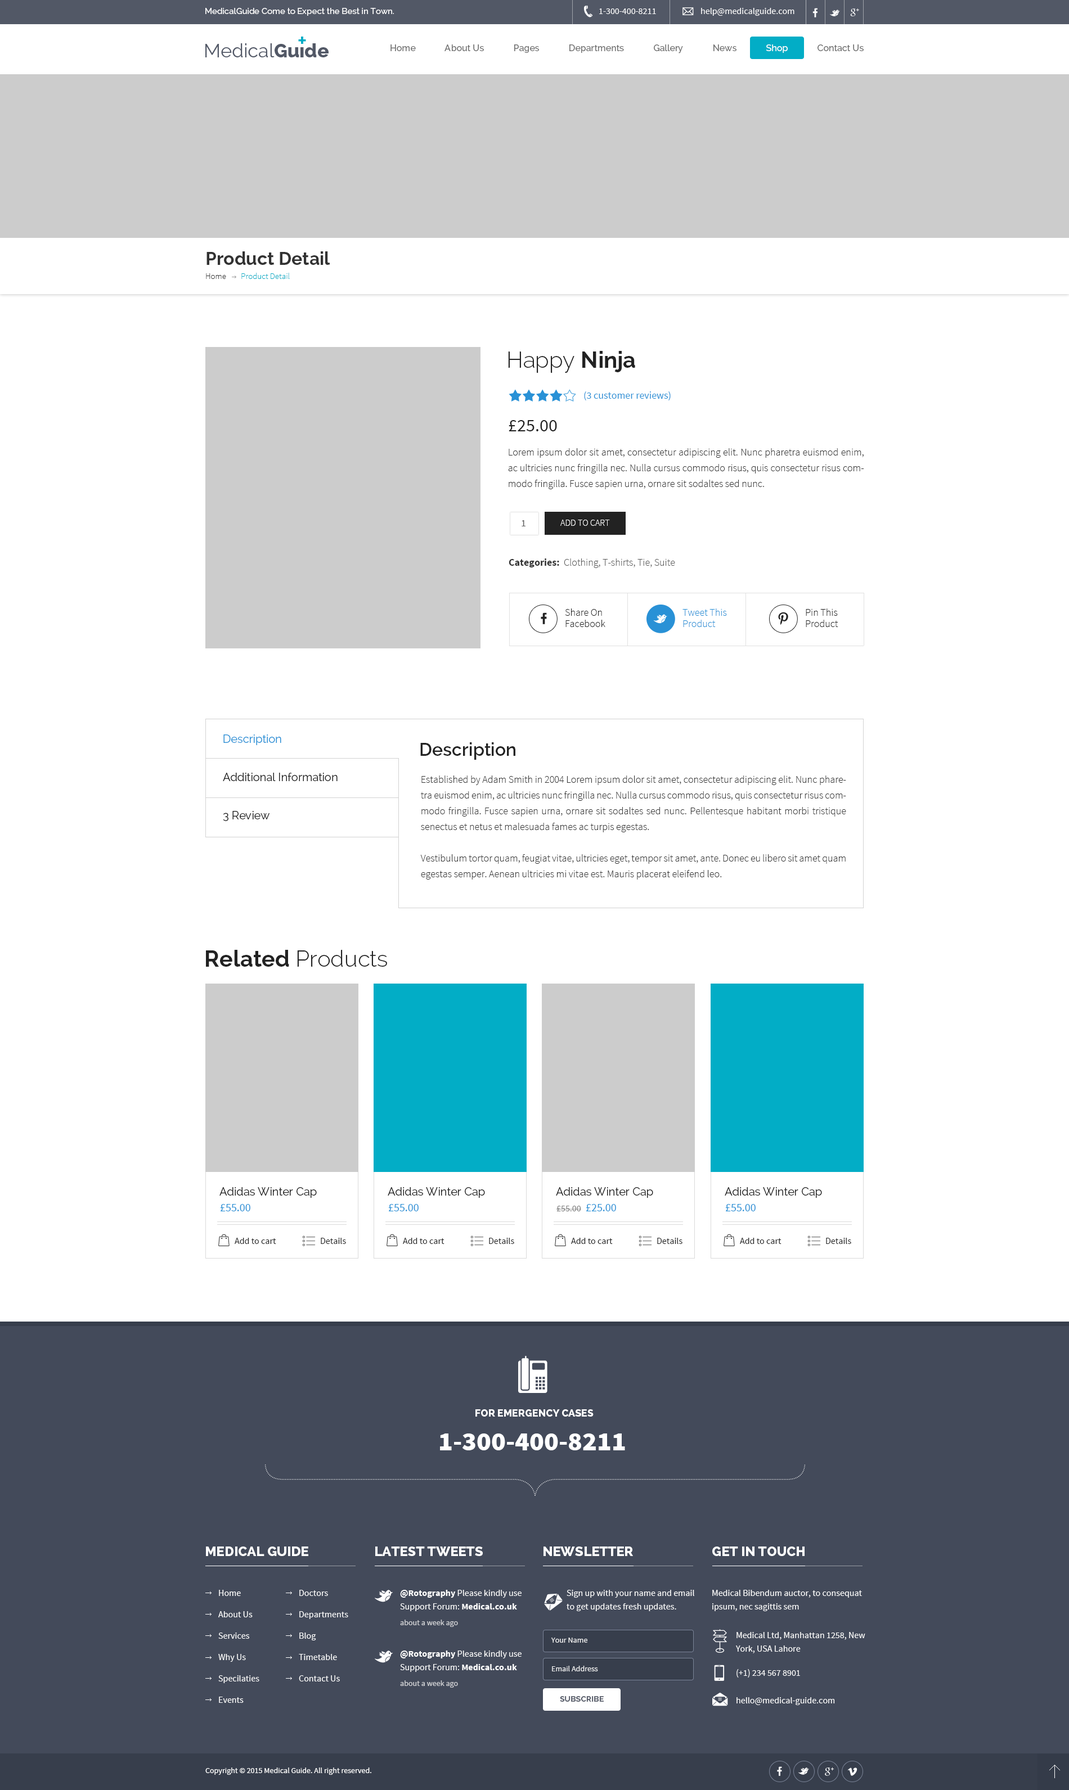
<style>
.page{position:relative;width:1069px;height:1790px;background:#ffffff}
.page>*{position:absolute;margin:0}
.t1{font:8.4px "Raleway-Medium";color:#ffffff}
.t2{font:9px "SourceSansPro-Regular";color:#ffffff}
.t3{font:11.4px "invent-communication";color:#ffffff}
.t4{font:9px "Raleway-Medium";color:#707070}
.t5{font:9px "Raleway-Medium";color:#ffffff}
.t6{font:18px "Raleway-Bold";color:#323232}
.t7{font:8.4px "SourceSansPro-Light";color:#333333}
.t8{font:8.4px "SourceSansPro-Light";color:#02adc6}
.t9{font:22.5px "Raleway-Light";color:#222222}
.t10{font:22.5px "Raleway-Bold";color:#222222}
.t11{font:10.1px "SourceSansPro-Regular";color:#2991d6}
.t12{font:18px "SourceSansPro-Regular";color:#222222}
.t13{font:10.1px/15.8px "SourceSansPro-Light";color:#333333}
.t14{font:10.1px "SourceSansPro-Regular";color:#5e5e5e}
.t15{font:9px "SourceSansPro-Light";color:#ffffff;text-transform:uppercase}
.t16{font:10.1px "SourceSansPro-Light";color:#595959}
.t17{font:10.1px "SourceSansPro-Bold";color:#333333}
.t18{font:10.1px/11.2px "SourceSansPro-Light";color:#222222}
.t19{font:10.1px/11.2px "SourceSansPro-Light";color:#2991d6}
.t20{font:11.2px/38.3px "Raleway-Regular";color:#222222}
.t21{font:11.2px/38.3px "Raleway-Regular";color:#2991d6}
.t22{font:18px "Raleway-SemiBold";color:#222222}
.t23{font:11.2px "Raleway-Regular";color:#222222}
.t24{font:11.2px "SourceSansPro-Regular";color:#2991d6}
.t25{font:9px "SourceSansPro-Regular";color:#797979}
.t26{font:9px "SourceSansPro-Regular";color:#222222}
.t27{font:39.5px "invent-communication";color:#ffffff}
.t28{font:10.1px "Raleway-ExtraBold";color:#ffffff;text-transform:uppercase}
.t29{font:27px "SourceSansPro-Black";color:#ffffff}
.t30{font:13.5px "Raleway-ExtraBold";color:#ffffff;text-transform:uppercase}
.t31{font:9px/21.4px "SourceSansPro-Regular";color:#ffffff}
.t32{font:9px/13.5px "SourceSansPro-Regular";color:#ffffff}
.t33{font:9px/13.5px "SourceSansPro-Bold";color:#ffffff}
.t34{font:7.9px "SourceSansPro-Regular";color:#d3d4d7}
.t35{font:7.9px "SourceSansPro-Regular";color:#ffffff}
.t36{font:7.9px "Raleway-Bold";color:#525866;text-transform:uppercase}
</style>
<div class="page">
<p class="t1" style="left:205px;top:8px;width:189px;height:8px">MedicalGuide Come to Expect the Best in Town.</p>
<p class="t2" style="left:599px;top:8px;width:57px;height:6px">1-300-400-8211</p>
<p class="t3" style="left:682px;top:7px;width:12px;height:8px">(</p>
<p class="t2" style="left:701px;top:8px;width:93px;height:8px">help@medicalguide.com</p>
<p class="t4" style="left:390px;top:44px;width:473px;height:9px">Home             About Us             Pages             Departments             Gallery             News             <span class="t5">Shop</span>             Contact Us</p>
<p class="t6" style="left:206px;top:251px;width:124px;height:14px">Product Detail</p>
<p class="t7" style="left:206px;top:273px;width:20px;height:6px">Home</p>
<p class="t8" style="left:241px;top:273px;width:49px;height:6px">Product Detail</p>
<p class="t9" style="left:508px;top:351px;width:127px;height:22px">Happy <span class="t10">Ninja</span></p>
<p class="t11" style="left:584px;top:392px;width:86px;height:8px">(3 customer reviews)</p>
<p class="t12" style="left:508px;top:420px;width:49px;height:11px">£25.00</p>
<p class="t13" style="left:508px;top:448px;width:356px;height:41px;text-align:justify">Lorem ipsum dolor sit amet, consectetur adipiscing elit. Nunc pharetra euismod enim, ac ultricies nunc fringilla nec. Nulla cursus commodo risus, quis consectetur risus commodo fringilla. Fusce sapien urna, ornare sit sodaltes sed nunc.</p>
<p class="t14" style="left:521px;top:520px;width:4px;height:6px">1</p>
<p class="t15" style="left:560px;top:520px;width:50px;height:6px">add to cart</p>
<p class="t16" style="left:508px;top:559px;width:167px;height:9px"><span class="t17">Categories:  </span>Clothing, T-shirts, Tie, Suite</p>
<p class="t18" style="left:565px;top:609px;width:40px;height:18px;text-align:justify">Share On<br>Facebook</p>
<p class="t19" style="left:682px;top:609px;width:45px;height:18px;text-align:justify">Tweet This<br>Product</p>
<p class="t18" style="left:806px;top:609px;width:32px;height:18px;text-align:justify">Pin This<br>Product</p>
<p class="t20" style="left:223px;top:735px;width:115px;height:86px"><span class="t21">Description<br></span>Additional Information<br>3 Review</p>
<p class="t22" style="left:420px;top:742px;width:95px;height:18px">Description</p>
<p class="t13" style="left:420px;top:776px;width:426px;height:104px;text-align:justify">Established by Adam Smith in 2004 Lorem ipsum dolor sit amet, consectetur adipiscing elit. Nunc pharetra euismod enim, ac ultricies nunc fringilla nec. Nulla cursus commodo risus, quis consectetur risus commodo fringilla. Fusce sapien urna, ornare sit sodaltes sed nunc. Pellentesque habitant morbi tristique senectus et netus et malesuada fames ac turpis egestas.<br><br>Vestibulum tortor quam, feugiat vitae, ultricies eget, tempor sit amet, ante. Donec eu libero sit amet quam egestas semper. Aenean ultricies mi vitae est. Mauris placerat eleifend leo.</p>
<p class="t9" style="left:206px;top:950px;width:181px;height:17px"><span class="t10">Related </span>Products</p>
<p class="t23" style="left:219px;top:1187px;width:98px;height:11px">Adidas Winter Cap</p>
<p class="t23" style="left:388px;top:1187px;width:97px;height:11px">Adidas Winter Cap</p>
<p class="t23" style="left:556px;top:1187px;width:97px;height:11px">Adidas Winter Cap</p>
<p class="t23" style="left:724px;top:1187px;width:98px;height:11px">Adidas Winter Cap</p>
<p class="t24" style="left:220px;top:1204px;width:30px;height:8px">£55.00</p>
<p class="t24" style="left:388px;top:1204px;width:30px;height:8px">£55.00</p>
<p class="t25" style="left:556px;top:1206px;width:25px;height:6px">£55.00</p>
<p class="t24" style="left:586px;top:1204px;width:30px;height:8px">£25.00</p>
<p class="t24" style="left:725px;top:1204px;width:30px;height:8px">£55.00</p>
<p class="t26" style="left:235px;top:1238px;width:41px;height:6px">Add to cart</p>
<p class="t26" style="left:321px;top:1238px;width:25px;height:6px">Details</p>
<p class="t26" style="left:403px;top:1238px;width:41px;height:6px">Add to cart</p>
<p class="t26" style="left:489px;top:1238px;width:25px;height:6px">Details</p>
<p class="t26" style="left:571px;top:1238px;width:42px;height:6px">Add to cart</p>
<p class="t26" style="left:657px;top:1238px;width:25px;height:6px">Details</p>
<p class="t26" style="left:740px;top:1238px;width:41px;height:6px">Add to cart</p>
<p class="t26" style="left:826px;top:1238px;width:25px;height:6px">Details</p>
<p class="t27" style="left:518px;top:1356px;width:29px;height:37px">0</p>
<p class="t28" style="left:475px;top:1410px;width:118px;height:7px">For emergency cases</p>
<p class="t29" style="left:440px;top:1434px;width:185px;height:17px">1-300-400-8211</p>
<p class="t30" style="left:206px;top:1547px;width:102px;height:9px">Medical guide</p>
<p class="t30" style="left:375px;top:1547px;width:108px;height:9px">LATEST TWEETS</p>
<p class="t30" style="left:543px;top:1547px;width:90px;height:9px">NEWSLETTER</p>
<p class="t30" style="left:712px;top:1547px;width:92px;height:9px">GET IN TOUCH</p>
<p class="t31" style="left:218px;top:1590px;width:41px;height:113px">Home<br>About Us<br>Services<br>Why Us<br>Specilaties<br>Events</p>
<p class="t31" style="left:299px;top:1590px;width:49px;height:92px">Doctors<br>Departments<br>Blog<br>Timetable<br>Contact Us</p>
<p class="t32" style="left:400px;top:1590px;width:121px;height:22px"><span class="t33">@Rotography</span> Please kindly use <br>Support Forum: <span class="t33">Medical.co.uk</span></p>
<p class="t32" style="left:566px;top:1590px;width:128px;height:22px">Sign up with your name and email<br>to get updates fresh updates.</p>
<p class="t32" style="left:712px;top:1590px;width:150px;height:22px">Medical Bibendum auctor, to consequat<br>ipsum, nec sagittis sem</p>
<p class="t34" style="left:400px;top:1620px;width:58px;height:7px">about a week ago</p>
<p class="t35" style="left:551px;top:1638px;width:36px;height:5px;opacity:0.9">Your Name</p>
<p class="t32" style="left:736px;top:1632px;width:129px;height:22px">Medical Ltd, Manhattan 1258, New<br>York, USA Lahore</p>
<p class="t32" style="left:400px;top:1651px;width:121px;height:21px"><span class="t33">@Rotography</span> Please kindly use <br>Support Forum: <span class="t33">Medical.co.uk</span></p>
<p class="t35" style="left:552px;top:1666px;width:46px;height:6px;opacity:0.9">Email Address</p>
<p class="t2" style="left:736px;top:1670px;width:64px;height:8px">(+1) 234 567 8901</p>
<p class="t34" style="left:400px;top:1681px;width:58px;height:7px">about a week ago</p>
<p class="t36" style="left:560px;top:1696px;width:44px;height:6px">subscribe</p>
<p class="t2" style="left:736px;top:1698px;width:99px;height:8px">hello@medical-guide.com</p>
<p class="t35" style="left:205px;top:1768px;width:166px;height:7px">Copyright © 2015 Medical Guide. All right reserved.</p>
</div>
